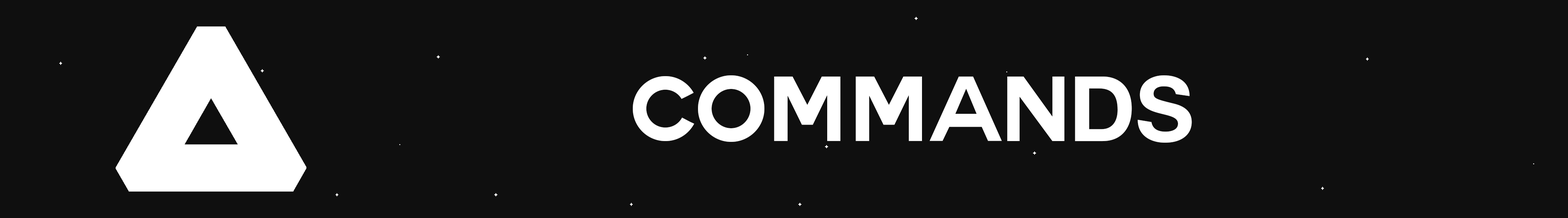
<style>
.page{position:relative;width:1568px;height:218px;background:#0f0f0f}
.page>*{position:absolute;margin:0}
.t1{font:89.9px "Couture-Bold";color:#ffffff}
</style>
<div class="page">
<p class="t1" style="left:633px;top:75px;width:559px;height:68px">COMMANDS</p>
</div>
